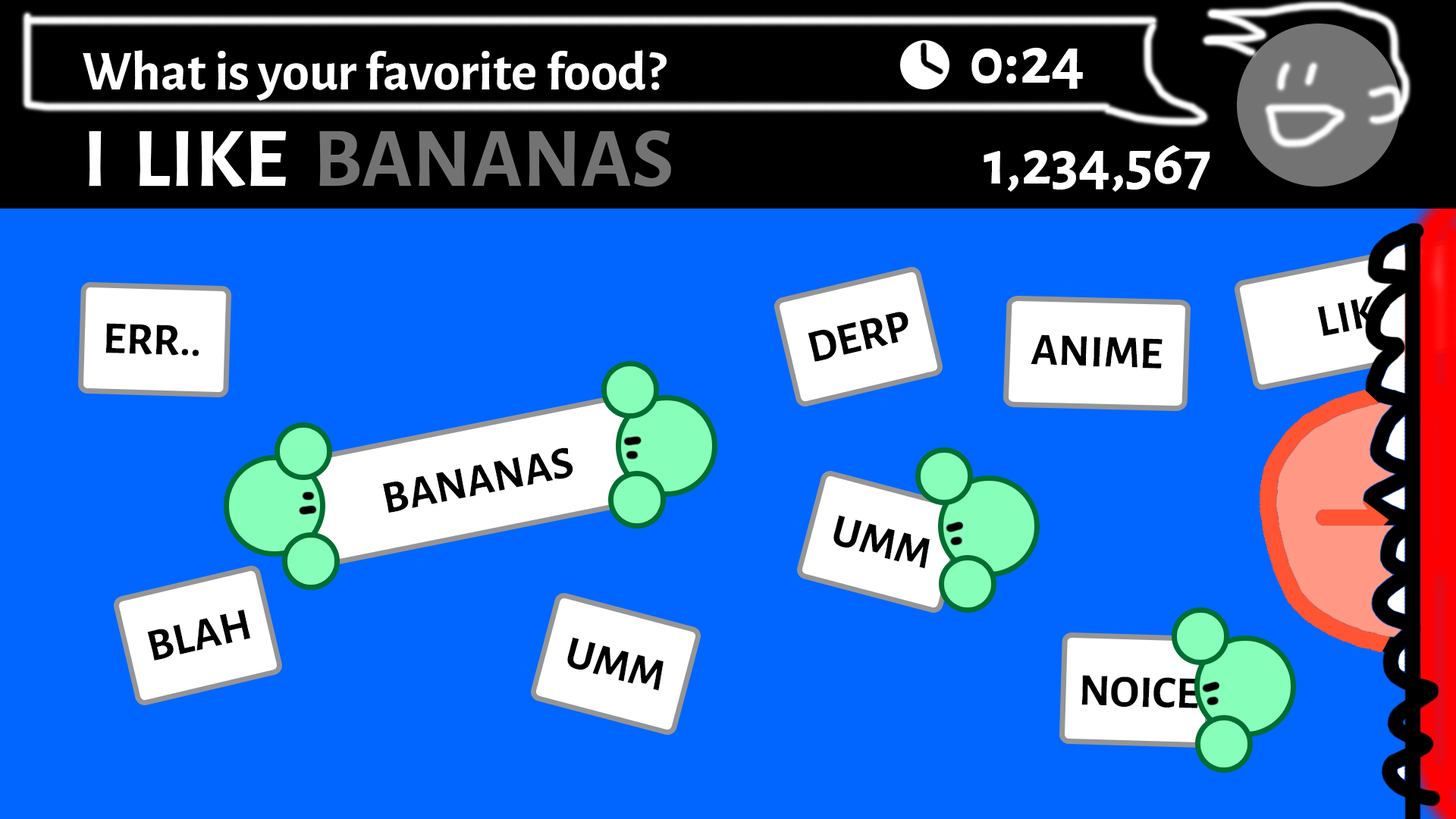
<style>
.page{position:relative;width:1456px;height:819px;background:#0066ff}
.page>*{position:absolute;margin:0}
.t1{font:55px "AlegreyaSans-Bold";color:#ffffff}
.t2{font:66.9px "AlegreyaSans-Bold";color:#ffffff}
.t3{font:84.6px "AlegreyaSans-Bold";color:#ffffff}
.t4{font:84.6px "AlegreyaSans-Bold";color:#737373}
.t5{font:63.7px "AlegreyaSans-Bold";color:#ffffff}
.t6{font:45.5px "AlegreyaSans-Bold";color:#000000}
</style>
<div class="page">
<p class="t1" style="left:83px;top:50px;width:584px;height:51px">What is your favorite food?</p>
<p class="t2" style="left:971px;top:48px;width:112px;height:41px">0:24</p>
<p class="t3" style="left:89px;top:130px;width:582px;height:57px">I  LIKE  <span class="t4">BANANAS</span></p>
<p class="t5" style="left:984px;top:145px;width:226px;height:47px">1,234,567</p>
<p class="t6" style="left:1317px;top:292px;width:84px;height:45px;rotate:-11deg">LIKE</p>
<p class="t6" style="left:808px;top:312px;width:100px;height:50px;rotate:-13deg">DERP</p>
<p class="t6" style="left:105px;top:323px;width:94px;height:33px;rotate:2deg">ERR..</p>
<p class="t6" style="left:1031px;top:334px;width:132px;height:35px;rotate:2deg">ANIME</p>
<p class="t6" style="left:383px;top:447px;width:190px;height:66px;rotate:-11deg">BANANAS</p>
<p class="t6" style="left:833px;top:515px;width:97px;height:54px;rotate:15deg">UMM</p>
<p class="t6" style="left:147px;top:609px;width:104px;height:51px;rotate:-13deg">BLAH</p>
<p class="t6" style="left:567px;top:637px;width:97px;height:54px;rotate:15deg">UMM</p>
<p class="t6" style="left:1081px;top:675px;width:118px;height:33px;rotate:2deg">NOICE</p>
</div>
